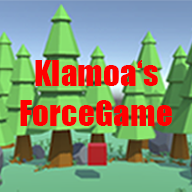
<style>
.page{position:relative;width:192px;height:192px}
.page>*{position:absolute;margin:0}
.t1{font:33.3px "Impact";color:#ff0000}
</style>
<div class="page">
<p class="t1" style="left:20px;top:60px;width:152px;height:66px;text-align:center">Klamoa‘s<br>ForceGame</p>
</div>
